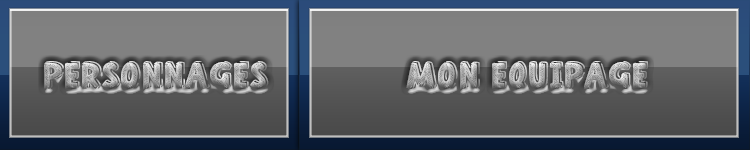
<style>
.page{position:relative;width:750px;height:150px;background:#818181}
.page>*{position:absolute;margin:0}
.t1{font:40px "HomeSchool"}
</style>
<div class="page">
<p class="t1" style="left:44px;top:61px;width:225px;height:28px">Personnages</p>
<p class="t1" style="left:406px;top:61px;width:242px;height:28px">Mon equipage</p>
</div>
